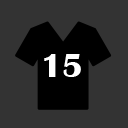
<style>
.page{position:relative;width:128px;height:128px;background:#333333}
.page>*{position:absolute;margin:0}
.t1{font:34.5px "BritannicBold";color:#ffffff}
</style>
<div class="page">
<p class="t1" style="left:44px;top:54px;width:37px;height:23px">15</p>
</div>
